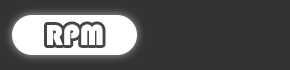
<style>
.page{position:relative;width:290px;height:70px;background:#333333}
.page>*{position:absolute;margin:0}
.t1{font:30px "Bauhaus93";color:#ffffff}
</style>
<div class="page">
<p class="t1" style="left:47px;top:24px;width:56px;height:21px">RPM</p>
</div>
